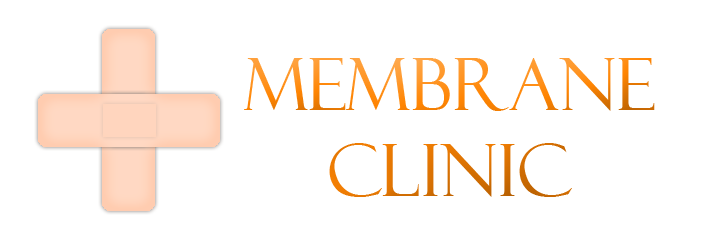
<style>
.page{position:relative;width:720px;height:240px;background:#ffffff}
.page>*{position:absolute;margin:0}
.t1{font:72px "FelixTitlingMT"}
</style>
<div class="page">
<p class="t1" style="left:244px;top:58px;width:411px;height:139px;text-align:center">Membrane<br>Clinic</p>
</div>
